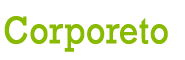
<style>
.page{position:relative;width:185px;height:60px;background:#ffffff}
.page>*{position:absolute;margin:0}
.t1{font:38.9px "Rockwell";color:#88ba02;font-weight:bold;scale:0.85 1}
</style>
<div class="page">
<p class="t1" style="left:4px;top:16px;width:164px;height:36px">Corporeto</p>
</div>
